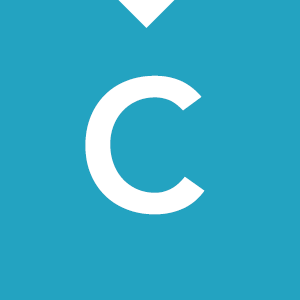
<style>
.page{position:relative;width:300px;height:300px;background:#23a3c1}
.page>*{position:absolute;margin:0}
.t1{font:186px "Avenir-Heavy";color:#ffffff}
</style>
<div class="page">
<p class="t1" style="left:85px;top:75px;width:120px;height:140px">C</p>
</div>
